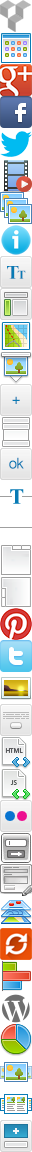
<style>
.page{position:relative;width:32px;height:1152px;background:#ffffff}
.page>*{position:absolute;margin:0}
.t1{font:19px "TimesNewRomanPS-BoldMT";letter-spacing:-0.05em;color:#077ab4}
.t2{font:12px "TimesNewRomanPS-BoldMT";letter-spacing:-0.05em;color:#077ab4}
.t3{font:15px "ArialMT";letter-spacing:-0.05em;color:#077ab4}
.t4{font:22px "TimesNewRomanPS-BoldMT";letter-spacing:-0.05em;color:#077ab4}
</style>
<div class="page">
<p class="t1" style="left:7px;top:266px;width:12px;height:13px">T</p>
<p class="t2" style="left:17px;top:270px;width:9px;height:9px">T</p>
<p class="t3" style="left:12px;top:396px;width:8px;height:8px">+</p>
<p class="t3" style="left:9px;top:457px;width:15px;height:12px">ok</p>
<p class="t4" style="left:10px;top:489px;width:14px;height:15px">T</p>
</div>
